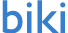
<style>
.page{position:relative;width:68px;height:33px;background:#ffffff}
.page>*{position:absolute;margin:0}
.t1{font:48px "GillSans";color:#367ece}
</style>
<div class="page">
<p class="t1" style="left:2px;top:0px;width:64px;height:33px">biki</p>
</div>
